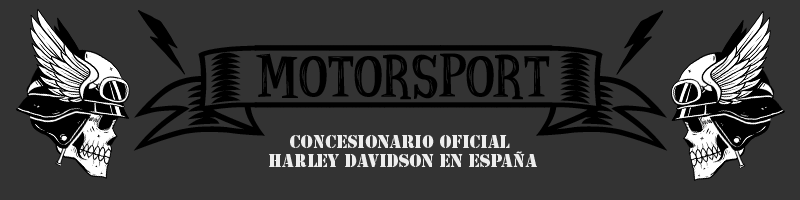
<style>
.page{position:relative;width:800px;height:200px;background:#333333}
.page>*{position:absolute;margin:0}
.t1{font:50.7px "AncientAd";color:#000000}
.t2{font:51.2px "AncientAd";color:#000000}
.t3{font:16.3px "StencilStd";color:#ededed}
</style>
<div class="page">
<p class="t1" style="left:133px;top:45px;width:535px;height:106px">&lt;                       &gt;</p>
<p class="t2" style="left:254px;top:45px;width:299px;height:63px">MOTORSPORT</p>
<p class="t3" style="left:269px;top:135px;width:268px;height:32px;text-align:center">concesionario oficial <br>Harley davidson en españa</p>
</div>
